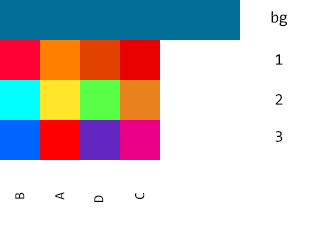
<style>
.page{position:relative;width:320px;height:240px;background:#ffffff}
.page>*{position:absolute;margin:0}
.t1{font:16.5px "Consolas";letter-spacing:-0.02em;color:#000000}
.t2{font:14.2px "Consolas";letter-spacing:0.12em;color:#000000}
.t3{font:14.2px "Consolas";letter-spacing:0.1em;color:#000000}
.t4{font:14.2px "Consolas";letter-spacing:-0.02em;color:#000000}
</style>
<div class="page">
<p class="t1" style="left:271px;top:11px;width:16px;height:16px">bg</p>
<p class="t1" style="left:275px;top:54px;width:8px;height:11px">1</p>
<p class="t1" style="left:275px;top:94px;width:8px;height:11px">2</p>
<p class="t1" style="left:275px;top:131px;width:8px;height:11px">3</p>
<p class="t2" style="left:15px;top:192px;width:10px;height:7px;rotate:-90deg">B</p>
<p class="t3" style="left:55px;top:192px;width:10px;height:8px;rotate:-90deg">A</p>
<p class="t4" style="left:94px;top:195px;width:10px;height:7px;rotate:-90deg">D</p>
<p class="t3" style="left:135px;top:193px;width:10px;height:6px;rotate:-90deg">C</p>
</div>
